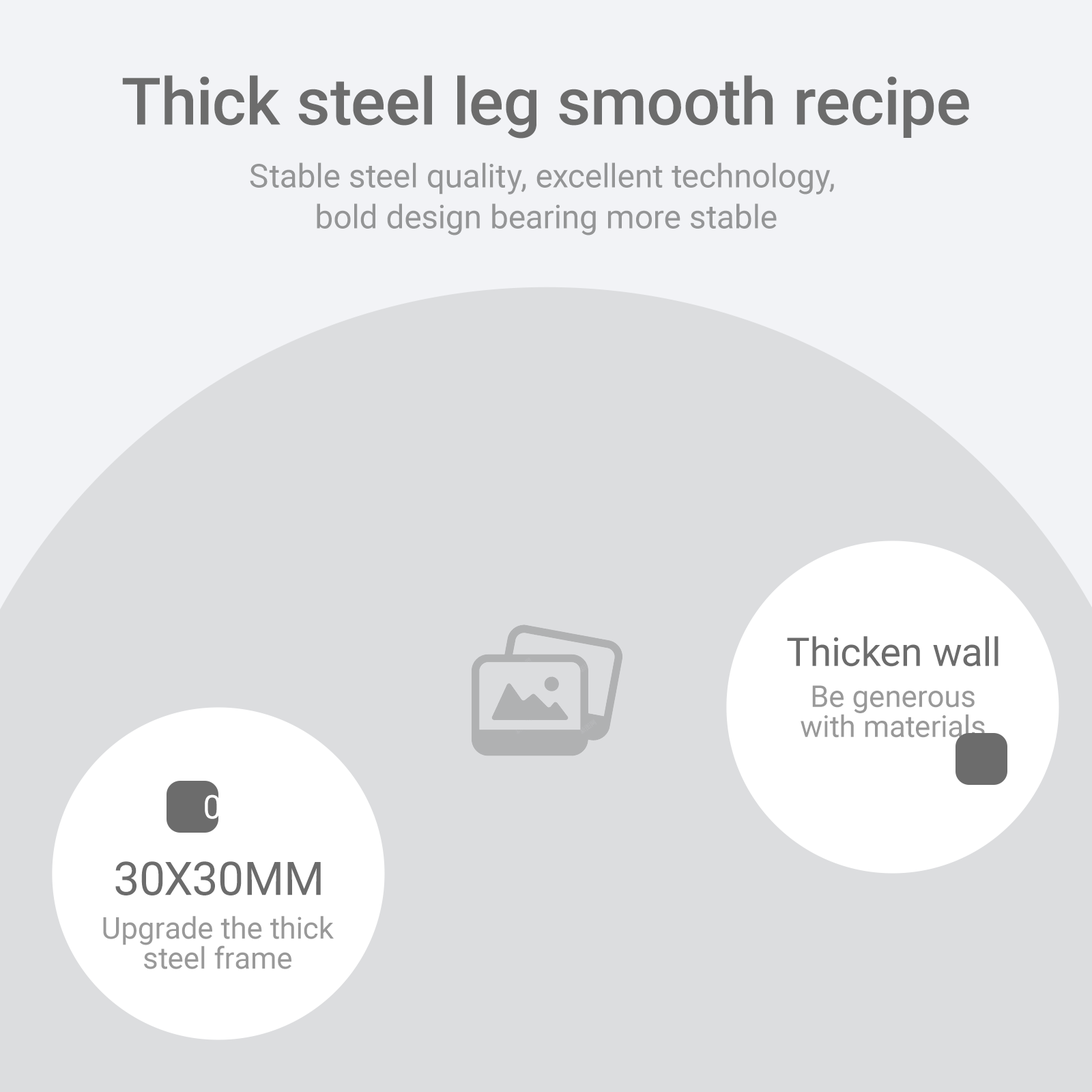
<style>
.page{position:relative;width:1092px;height:1092px;background:#dcdddf}
.page>*{position:absolute;margin:0}
.t1{font:65.5px "Roboto-Medium";color:#6c6c6c}
.t2{font:32.8px/40.9px "Roboto-Regular";color:#949596}
.t3{font:39.6px "Roboto-Regular";color:#6c6c6c}
.t4{font:30px/30px "Roboto-Regular";color:#999999}
.t5{font:32.8px "Roboto-Regular";color:#ffffff;text-transform:uppercase}
.t6{font:46.4px "Roboto-Regular";color:#6c6c6c;text-transform:uppercase}
</style>
<div class="page">
<p class="t1" style="left:122px;top:75px;width:847px;height:64px">Thick steel leg smooth recipe</p>
<p class="t2" style="left:250px;top:162px;width:584px;height:73px;text-align:center">Stable steel quality, excellent technology, <br>bold design bearing more stable</p>
<p class="t3" style="left:787px;top:636px;width:211px;height:31px">Thicken wall</p>
<p class="t4" style="left:801px;top:685px;width:184px;height:53px;text-align:center">Be generous<br>with materials</p>
<p class="t5" style="left:205px;top:794px;width:28px;height:25px">01</p>
<p class="t6" style="left:115px;top:861px;width:206px;height:34px">30x30mm</p>
<p class="t4" style="left:103px;top:916px;width:231px;height:53px;text-align:center">Upgrade the thick<br>steel frame</p>
</div>
